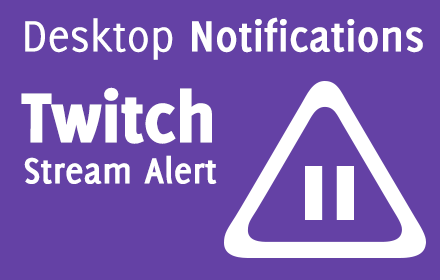
<style>
.page{position:relative;width:440px;height:280px;background:#6441a5}
.page>*{position:absolute;margin:0}
.t1{font:47.5px "Delicious-Bold";color:#ffffff}
.t2{font:47.5px "Delicious-Roman";color:#ffffff}
.t3{font:77.2px "Delicious-Heavy";color:#ffffff}
.t4{font:39.5px "Delicious-Bold";color:#ffffff}
</style>
<div class="page">
<p class="t1" style="left:25px;top:17px;width:398px;height:43px"><span class="t2">Desktop </span>Notifications</p>
<p class="t3" style="left:21px;top:87px;width:191px;height:57px">Twitch</p>
<p class="t4" style="left:24px;top:155px;width:193px;height:29px">Stream Alert</p>
</div>
